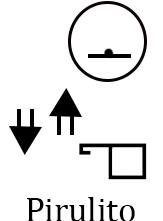
<style>
.page{position:relative;width:163px;height:221px;background:#ffffff}
.page>*{position:absolute;margin:0}
.t1{font:34.7px "Cambria";color:#000000}
</style>
<div class="page">
<p class="t1" style="left:27px;top:197px;width:108px;height:25px">Pirulito</p>
</div>
